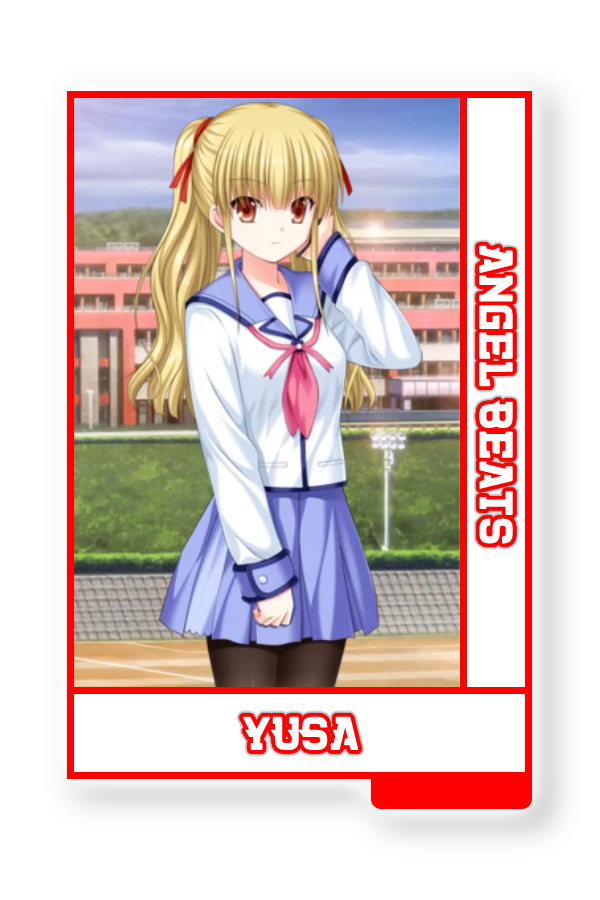
<style>
.page{position:relative;width:600px;height:900px;background:#ffffff}
.page>*{position:absolute;margin:0}
.t1{font:48.8px "KillerCollege";color:#ffffff}
.t2{font:48.6px "KillerCollege";color:#ffffff}
</style>
<div class="page">
<p class="t1" style="left:479px;top:245px;width:34px;height:299px;rotate:90deg">Angel Beats</p>
<p class="t2" style="left:242px;top:716px;width:117px;height:35px">YUSA</p>
</div>
